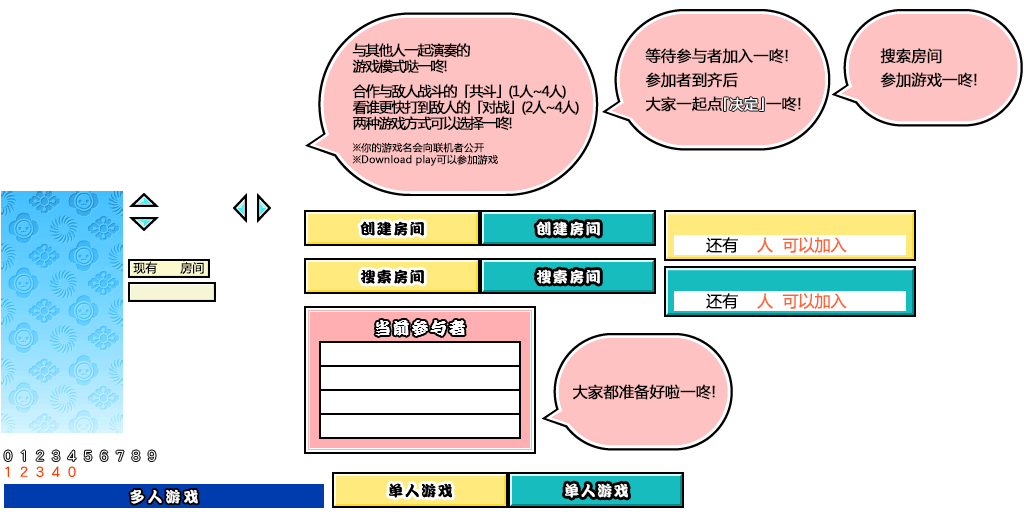
<style>
.page{position:relative;width:1024px;height:512px;background:#ffffff}
.page>*{position:absolute;margin:0}
.t1{font:14px/16px "MicrosoftYaHei";letter-spacing:-0.1em;color:#000000;font-weight:bold}
.t2{font:10px/12px "MicrosoftYaHei";color:#000000;font-weight:bold}
.t3{font:15px/24px "MicrosoftYaHei";color:#000000;font-weight:bold}
.t4{font:14px "MicrosoftYaHei";color:#ffffff;font-weight:bold}
.t5{font:15px "DFPKanTingLiuW9";letter-spacing:0.1em;color:#000000}
.t6{font:15px "DFPKanTingLiuW9";letter-spacing:0.1em;color:#ffffff}
.t7{font:16px "MicrosoftYaHei";color:#ff6333}
.t8{font:16px "MicrosoftYaHei";color:#000000}
.t9{font:12px "MicrosoftYaHei";color:#000000}
.t10{font:17px "DFPKanTingLiuW9";letter-spacing:0.1em;color:#ffffff}
.t11{font:15px "MicrosoftYaHei";color:#000000;font-weight:bold}
.t12{font:15px "DFPKanTingLiuW9";letter-spacing:0.2em;color:#ffffff}
</style>
<div class="page">
<p class="t1" style="left:352px;top:43px;width:227px;height:123px">与其他人一起演奏的<br>游戏模式哒一咚!<br><br>合作与敌人战斗的「共斗」(1人~4人)<br>看谁更快打到敌人的「对战」(2人~4人)<br>两种游戏方式可以选择一咚!<br><br><span class="t2">※你的游戏名会向联机者公开<br>※Download play可以参加游戏</span></p>
<p class="t3" style="left:645px;top:48px;width:156px;height:64px">等待参与者加入一咚!<br>参加者到齐后<br>大家一起点         一咚!</p>
<p class="t3" style="left:880px;top:48px;width:97px;height:40px">搜索房间<br>参加游戏一咚!</p>
<p class="t4" style="left:724px;top:97px;width:40px;height:14px">「决定」</p>
<p class="t5" style="left:360px;top:221px;width:64px;height:15px">创建房间</p>
<p class="t5" style="left:360px;top:221px;width:64px;height:15px">创建房间</p>
<p class="t6" style="left:536px;top:221px;width:64px;height:15px">创建房间</p>
<p class="t7" style="left:706px;top:237px;width:141px;height:16px"><span class="t8">还有    </span>人  可以加入</p>
<p class="t9" style="left:133px;top:262px;width:25px;height:12px">现有</p>
<p class="t9" style="left:180px;top:262px;width:24px;height:12px">房间</p>
<p class="t5" style="left:360px;top:269px;width:64px;height:15px">搜索房间</p>
<p class="t5" style="left:360px;top:269px;width:64px;height:15px">搜索房间</p>
<p class="t6" style="left:536px;top:269px;width:64px;height:15px">搜索房间</p>
<p class="t7" style="left:706px;top:293px;width:141px;height:16px"><span class="t8">还有    </span>人  可以加入</p>
<p class="t10" style="left:375px;top:320px;width:90px;height:16px">当前参与者</p>
<p class="t11" style="left:572px;top:384px;width:143px;height:16px">大家都准备好啦一咚!</p>
<p class="t5" style="left:389px;top:483px;width:63px;height:15px">单人游戏</p>
<p class="t5" style="left:389px;top:483px;width:63px;height:15px">单人游戏</p>
<p class="t6" style="left:565px;top:483px;width:63px;height:15px">单人游戏</p>
<p class="t12" style="left:130px;top:489px;width:68px;height:15px">多人游戏</p>
</div>
